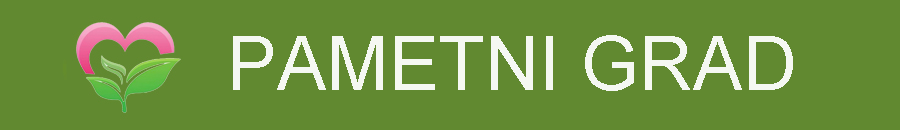
<style>
.page{position:relative;width:900px;height:130px;background:#618930}
.page>*{position:absolute;margin:0}
.t1{font:75px "ArialMT";color:#f5f8f2}
</style>
<div class="page">
<p class="t1" style="left:233px;top:35px;width:560px;height:56px">PAMETNI GRAD</p>
</div>
